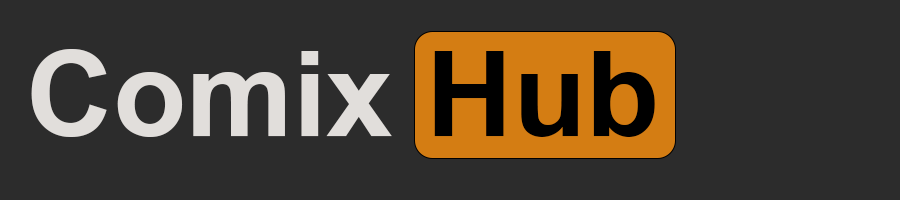
<style>
.page{position:relative;width:900px;height:200px;background:#2c2c2c}
.page>*{position:absolute;margin:0}
.t1{font:120px "OrionEsperantoDika";color:#e1dedb}
.t2{font:120px "OrionEsperantoDika";color:#000000}
</style>
<div class="page">
<p class="t1" style="left:31px;top:49px;width:624px;height:88px">Comix <span class="t2">Hub</span></p>
</div>
